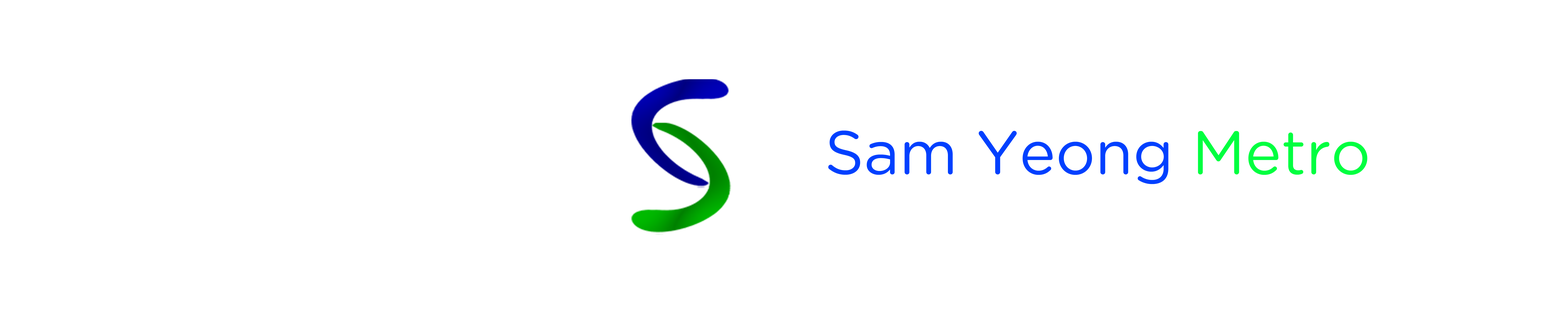
<style>
.page{position:relative;width:1568px;height:314px;background:#ffffff}
.page>*{position:absolute;margin:0}
.t1{font:61.2px "GothamRounded-Book";color:#0040ff}
.t2{font:61.2px "GothamRounded-Book";color:#00ff40}
</style>
<div class="page">
<p class="t1" style="left:828px;top:130px;width:539px;height:54px">Sam Yeong <span class="t2">Metro</span></p>
</div>
